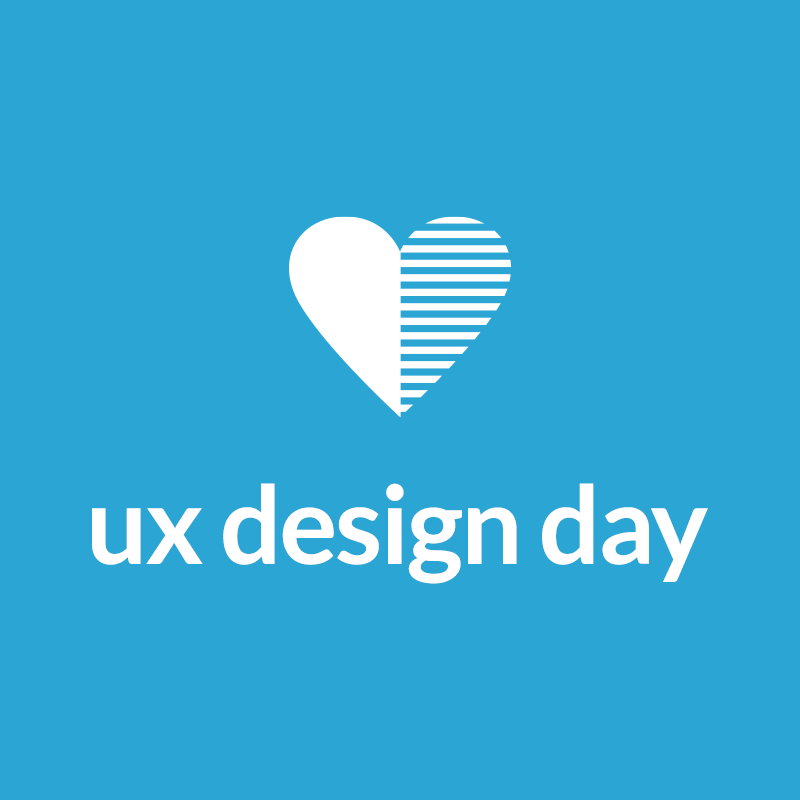
<style>
.page{position:relative;width:800px;height:800px;background:#2ba6d4}
.page>*{position:absolute;margin:0}
.t1{font:108px "Lato-Bold";letter-spacing:-0.02em;color:#ffffff}
</style>
<div class="page">
<p class="t1" style="left:92px;top:483px;width:616px;height:101px">ux design day</p>
</div>
